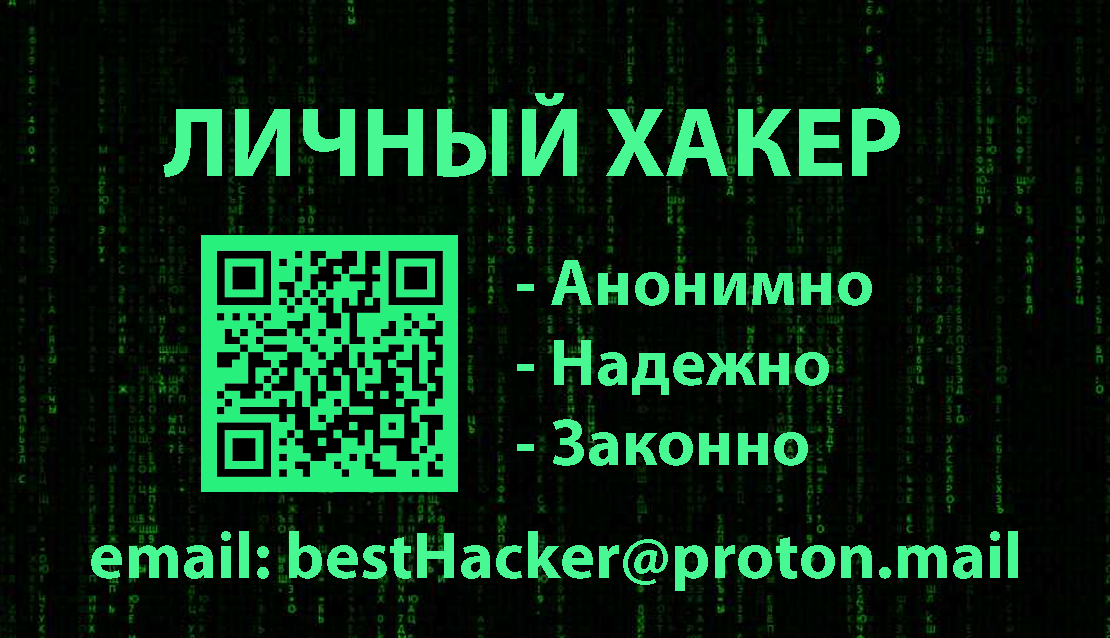
<style>
.page{position:relative;width:1110px;height:638px}
.page>*{position:absolute;margin:0}
.t1{font:100px "MyriadPro-Bold";color:#48f892}
.t2{font:66.7px "MyriadPro-Bold";color:#48f892}
</style>
<div class="page">
<p class="t1" style="left:163px;top:93px;width:737px;height:84px">ЛИЧНЫЙ ХАКЕР</p>
<p class="t2" style="left:517px;top:260px;width:355px;height:206px">- Анонимно<br>- Надежно<br>- Законно</p>
<p class="t2" style="left:91px;top:531px;width:927px;height:60px">email: bestHacker@proton.mail</p>
</div>
